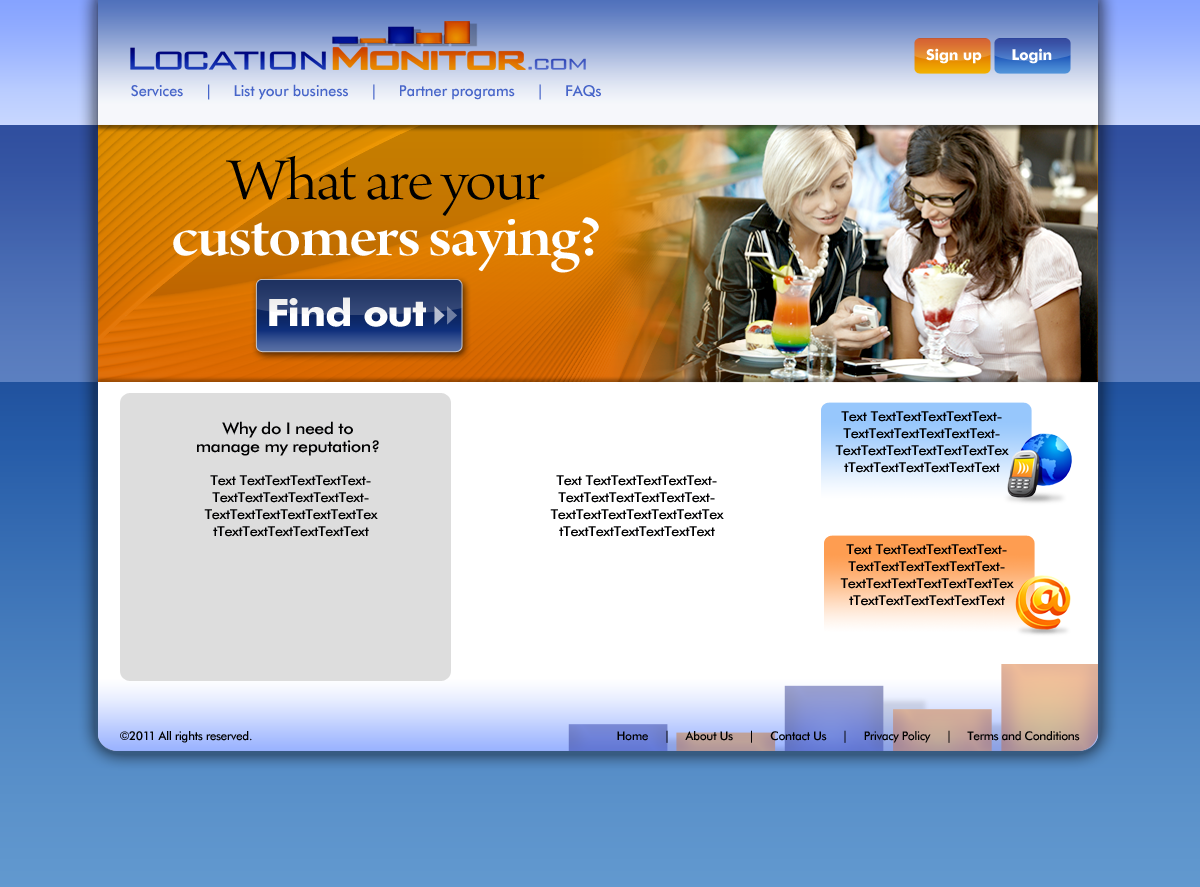
<style>
.page{position:relative;width:1200px;height:887px}
.page>*{position:absolute;margin:0}
.t1{font:15px "FuturaBT-Bold";letter-spacing:-0.015em;color:#ffffff}
.t2{font:15px "FuturaBT-Medium";letter-spacing:-0.015em;color:#4765c9}
.t3{font:62.6px/55.3px "ArnoPro-SmbdDisplay";letter-spacing:-0.025em;color:#ffffff;scale:1.11 1}
.t4{font:62.6px/77.2px "ArnoPro-LightDisplay";letter-spacing:-0.025em;color:#000000;scale:1.11 1}
.t5{font:37.7px "FuturaBT-Bold";letter-spacing:-0.035em;color:#ffffff;scale:1.11 1}
.t6{font:13.5px/16.9px "FuturaBT-Medium";letter-spacing:-0.035em;color:#000001;scale:1.11 1}
.t7{font:16.2px/18px "FuturaBT-Medium";letter-spacing:-0.035em;color:#000001;scale:1.11 1}
.t8{font:16.2px/22px "FuturaBT-Medium";letter-spacing:-0.035em;color:#000001;scale:1.11 1}
.t9{font:12px "FuturaBT-Medium";letter-spacing:-0.035em;color:#000000}
</style>
<div class="page">
<p class="t1" style="left:926px;top:48px;width:56px;height:16px">Sign up</p>
<p class="t1" style="left:1012px;top:48px;width:40px;height:16px">Login</p>
<p class="t2" style="left:131px;top:84px;width:470px;height:16px">Services     |     List your business     |     Partner programs     |     FAQs</p>
<p class="t3" style="left:173px;top:155px;width:426px;height:118px;text-align:center"><span class="t4">What are your<br></span>customers saying?</p>
<p class="t5" style="left:269px;top:297px;width:157px;height:30px">Find out</p>
<p class="t6" style="left:835px;top:411px;width:174px;height:62px;text-align:center">Text TextTextTextTextTextTextTextTextTextTextTextTextTextTextTextTextTextTextTextTextTextTextTextText</p>
<p class="t7" style="left:197px;top:421px;width:182px;height:35px;text-align:center"><span class="t8">Why do I need to<br></span>manage my reputation?</p>
<p class="t6" style="left:204px;top:475px;width:174px;height:62px;text-align:center">Text TextTextTextTextTextTextTextTextTextTextTextTextTextTextTextTextTextTextTextTextTextTextTextText</p>
<p class="t6" style="left:550px;top:475px;width:174px;height:62px;text-align:center">Text TextTextTextTextTextTextTextTextTextTextTextTextTextTextTextTextTextTextTextTextTextTextTextText</p>
<p class="t6" style="left:840px;top:544px;width:174px;height:62px;text-align:center">Text TextTextTextTextTextTextTextTextTextTextTextTextTextTextTextTextTextTextTextTextTextTextTextText</p>
<p class="t9" style="left:120px;top:731px;width:132px;height:12px">©2011 All rights reserved.</p>
<p class="t9" style="left:617px;top:730px;width:463px;height:13px">Home     |     About Us     |     Contact Us     |     Privacy Policy     |     Terms and Conditions</p>
</div>
